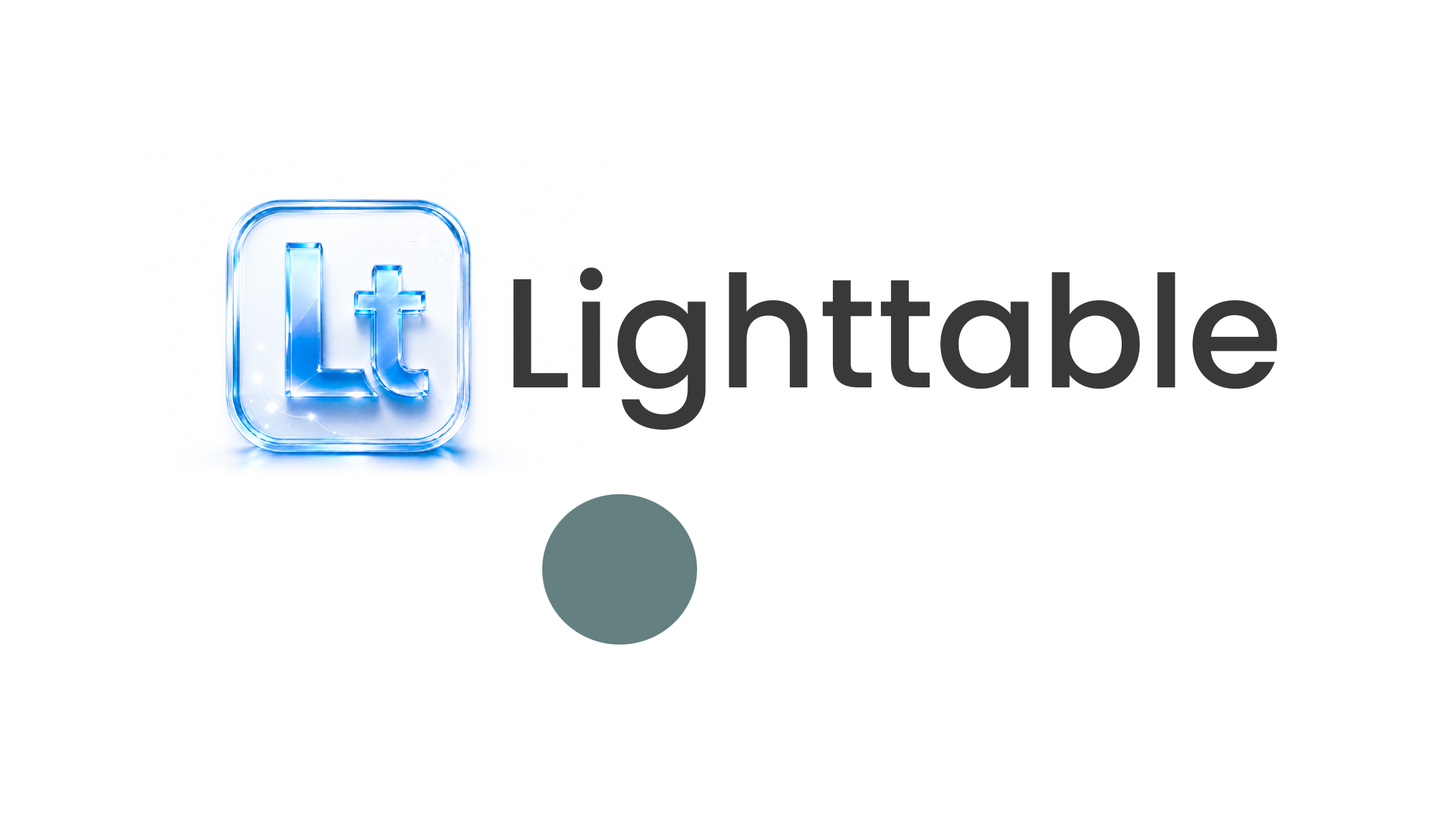
<style>
.page{position:relative;width:1456px;height:819px;background:#ffffff}
.page>*{position:absolute;margin:0}
.t1{font:155.7px "Poppins-Medium";color:#393939}
</style>
<div class="page">
<p class="t1" style="left:513px;top:267px;width:764px;height:163px">Lighttable</p>
</div>
